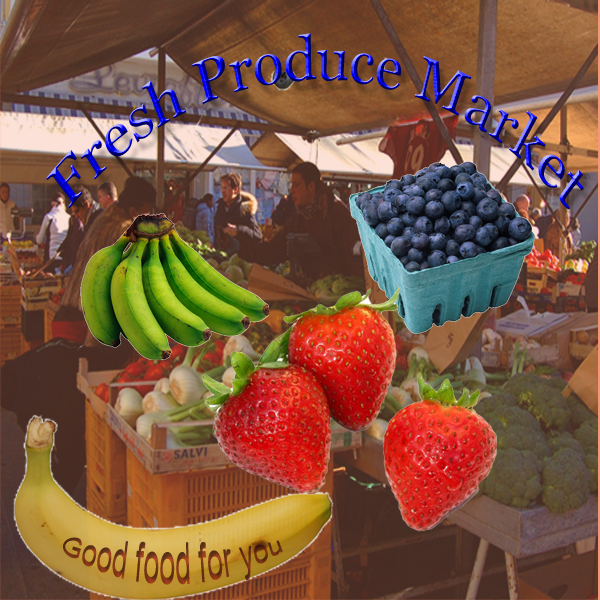
<style>
.page{position:relative;width:600px;height:600px}
.page>*{position:absolute;margin:0}
.t1{font:60.5px "Georgia";letter-spacing:0.01em;scale:0.79 1}
.t2{font:18px "ArialMT";letter-spacing:0.01em;scale:1.5 1}
</style>
<div class="page">
<p class="t1" style="left:46px;top:33px;width:538px;height:177px">Fresh Produce Market</p>
<p class="t2" style="left:63px;top:537px;width:220px;height:48px">Good food for you</p>
</div>
